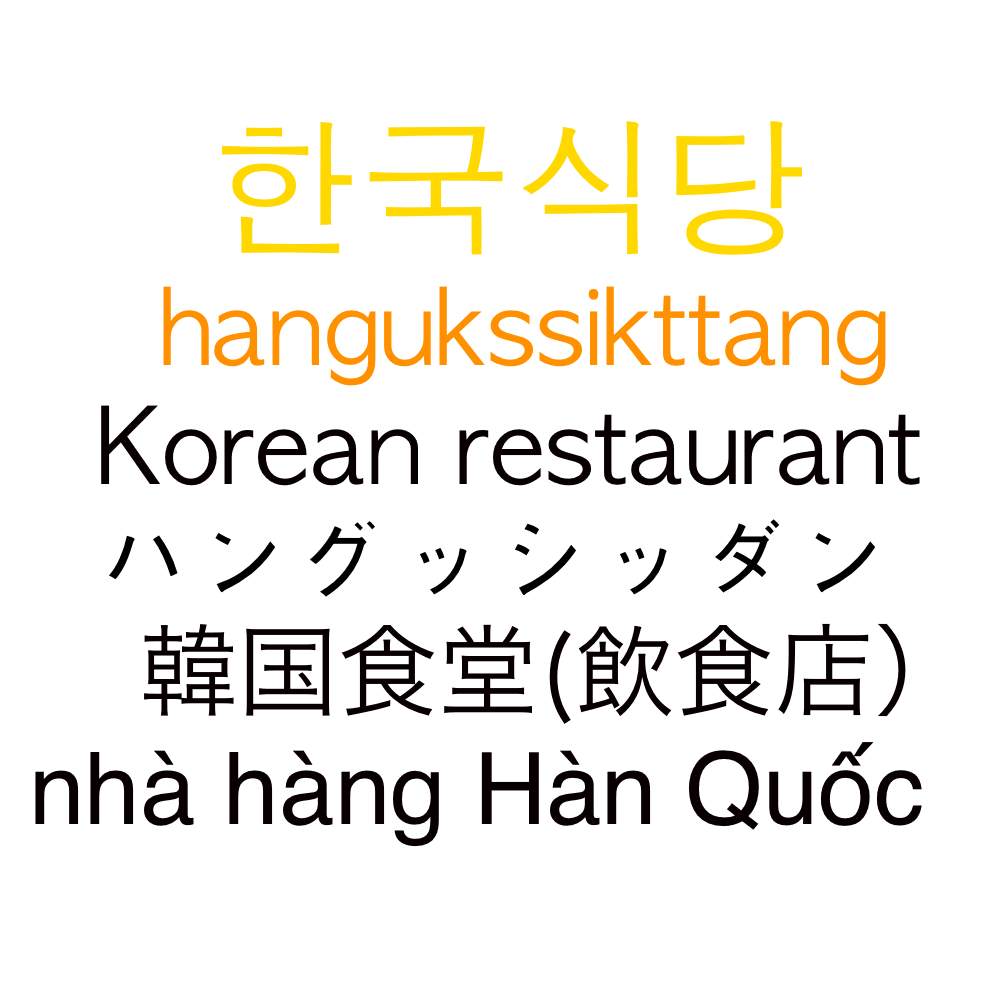
<style>
.page{position:relative;width:1000px;height:1000px;background:#ffffff}
.page>*{position:absolute;margin:0}
.t1{font:150px "AppleGothic";color:#ffd800}
.t2{font:100px "AppleGothic";color:#ff9000}
.t3{font:100px "AppleGothic";color:#080000}
.t4{font:100px "AppleGothic";color:#000000}
.t5{font:100px "HiraKakuProN-W3";color:#080000}
.t6{font:100px "Helvetica";color:#080000}
</style>
<div class="page">
<p class="t1" style="left:222px;top:121px;width:580px;height:134px">한국식당</p>
<p class="t2" style="left:163px;top:286px;width:723px;height:100px">hangukssikttang</p>
<p class="t3" style="left:101px;top:405px;width:819px;height:81px">Korean restaurant</p>
<p class="t4" style="left:109px;top:519px;width:766px;height:78px">ハングッシッダン</p>
<p class="t5" style="left:144px;top:623px;width:762px;height:101px">韓国食堂(飲食店）</p>
<p class="t6" style="left:35px;top:742px;width:887px;height:105px">nhà hàng Hàn Quốc</p>
</div>
